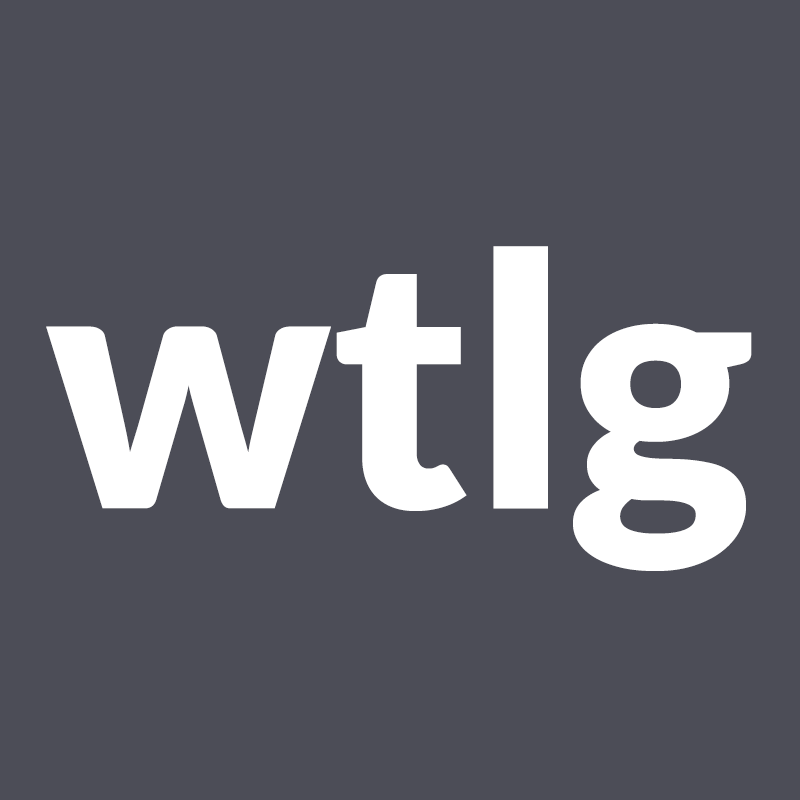
<style>
.page{position:relative;width:800px;height:800px;background:#4c4d57}
.page>*{position:absolute;margin:0}
.t1{font:350px "Lato-Black";color:#ffffff}
</style>
<div class="page">
<p class="t1" style="left:46px;top:246px;width:706px;height:325px">wtlg</p>
</div>
